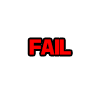
<style>
.page{position:relative;width:100px;height:100px;background:#ffffff}
.page>*{position:absolute;margin:0}
.t1{font:18.8px "Typo_SsangmunDong_B";letter-spacing:-0.033em;color:#ff0000}
</style>
<div class="page">
<p class="t1" style="left:29px;top:39px;width:42px;height:16px">FAIL</p>
</div>
